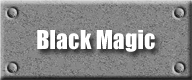
<style>
.page{position:relative;width:192px;height:80px}
.page>*{position:absolute;margin:0}
.t1{font:24px "Impact";color:#ffffff}
</style>
<div class="page">
<p class="t1" style="left:37px;top:30px;width:118px;height:22px">Black Magic</p>
</div>
